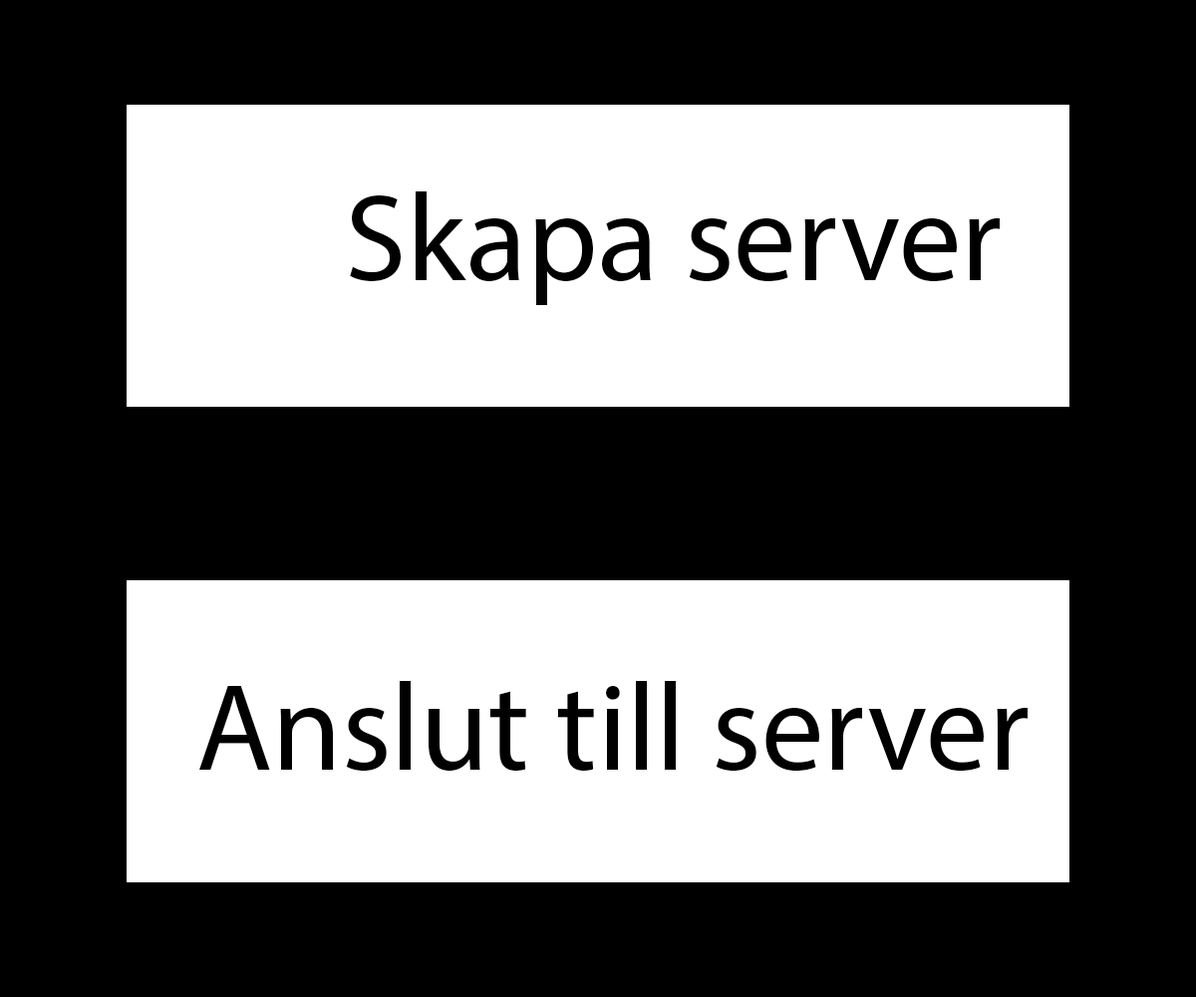
<style>
.page{position:relative;width:1196px;height:997px;background:#000000}
.page>*{position:absolute;margin:0}
.t1{font:124.6px "MyriadPro-Regular";color:#000000}
</style>
<div class="page">
<p class="t1" style="left:350px;top:191px;width:650px;height:114px">Skapa server</p>
<p class="t1" style="left:199px;top:681px;width:829px;height:91px">Anslut till server</p>
</div>
